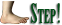
<style>
.page{position:relative;width:62px;height:25px;background:#ffffff}
.page>*{position:absolute;margin:0}
.t1{font:27.2px "BirchStd";color:#014c16;font-variant:small-caps}
</style>
<div class="page">
<p class="t1" style="left:31px;top:3px;width:29px;height:20px">Step!</p>
</div>
